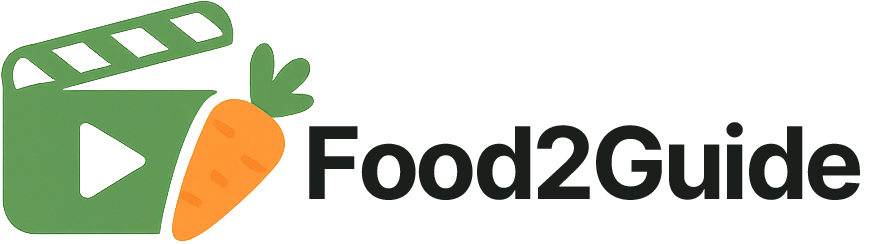
<style>
.page{position:relative;width:883px;height:244px;background:#ffffff}
.page>*{position:absolute;margin:0}
.t1{font:100px "Inter-Bold";letter-spacing:-0.04em;color:#1a1f1c}
</style>
<div class="page">
<p class="t1" style="left:309px;top:122px;width:551px;height:78px">Food2Guide</p>
</div>
